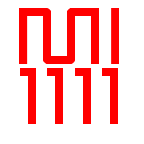
<style>
.page{position:relative;width:144px;height:144px;background:#ffffff}
.page>*{position:absolute;margin:0}
.t1{font:72px/60px "Radioaktivitet";color:#ff0000}
.t2{font:72px "Radioaktivitet";color:#ff0000}
</style>
<div class="page">
<p class="t1" style="left:19px;top:8px;width:100px;height:116px;text-align:center">MI<br>1111<br><span class="t2"><br><br>SUCO</span></p>
</div>
